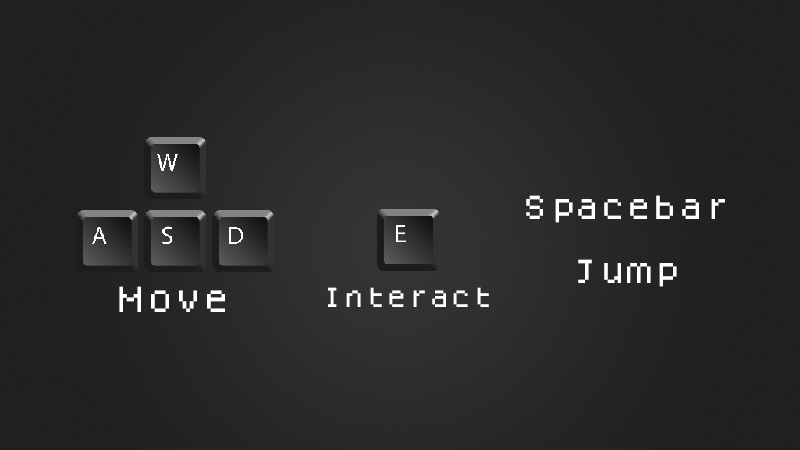
<style>
.page{position:relative;width:800px;height:450px}
.page>*{position:absolute;margin:0}
.t1{font:26.6px "Dogica";letter-spacing:-0.025em;color:#ffffff}
.t2{font:28.7px "Dogica";letter-spacing:-0.025em;color:#ffffff}
.t3{font:21.9px "Dogica";letter-spacing:-0.025em;color:#ffffff}
</style>
<div class="page">
<p class="t1" style="left:526px;top:195px;width:199px;height:92px;text-align:center">Spacebar<br><br>Jump</p>
<p class="t2" style="left:119px;top:286px;width:106px;height:26px">Move</p>
<p class="t3" style="left:328px;top:287px;width:161px;height:20px">Interact</p>
</div>
